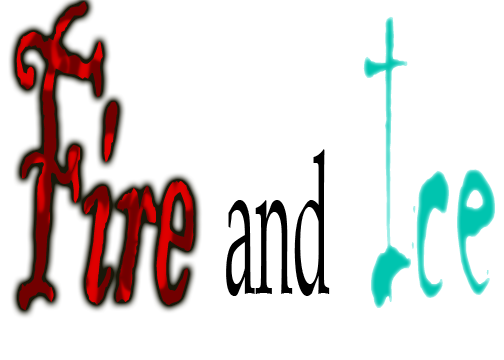
<style>
.page{position:relative;width:504px;height:360px;background:#ffffff}
.page>*{position:absolute;margin:0}
.t1{font:413.3px "BlackadderITC-Regular";scale:0.32 1}
.t2{font:413.3px "Chiller-Regular";scale:0.32 1}
.t3{font:198.4px "BookAntiqua";color:#000000;scale:0.32 1}
</style>
<div class="page">
<p class="t1" style="left:16px;top:1px;width:178px;height:309px">Fire</p>
<p class="t2" style="left:363px;top:16px;width:132px;height:292px">Ice</p>
<p class="t3" style="left:226px;top:149px;width:104px;height:147px">and</p>
</div>
